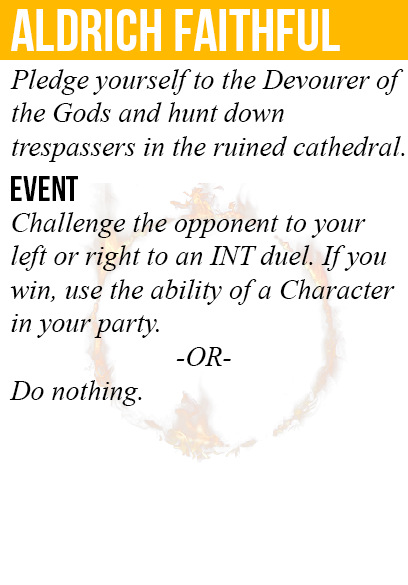
<style>
.page{position:relative;width:408px;height:585px;background:#ffffff}
.page>*{position:absolute;margin:0}
.t1{font:60px "BebasNeue";color:#ffffff}
.t2{font:28px "TimesNewRomanPS-ItalicMT";color:#000000}
.t3{font:36px "BebasNeue";color:#000000}
</style>
<div class="page">
<p class="t1" style="left:11px;top:9px;width:329px;height:42px">aldrich faithful</p>
<p class="t2" style="left:10px;top:69px;width:395px;height:93px">Pledge yourself to the Devourer of<br>the Gods and hunt down<br>trespassers in the ruined cathedral.</p>
<p class="t3" style="left:11px;top:176px;width:67px;height:25px">event</p>
<p class="t2" style="left:9px;top:212px;width:386px;height:194px">Challenge the opponent to your<br>left or right to an INT duel. If you<br>win, use the ability of a Character<br>in your party.<br><br>Do nothing.</p>
<p class="t2" style="left:176px;top:347px;width:55px;height:19px">-OR-</p>
</div>
